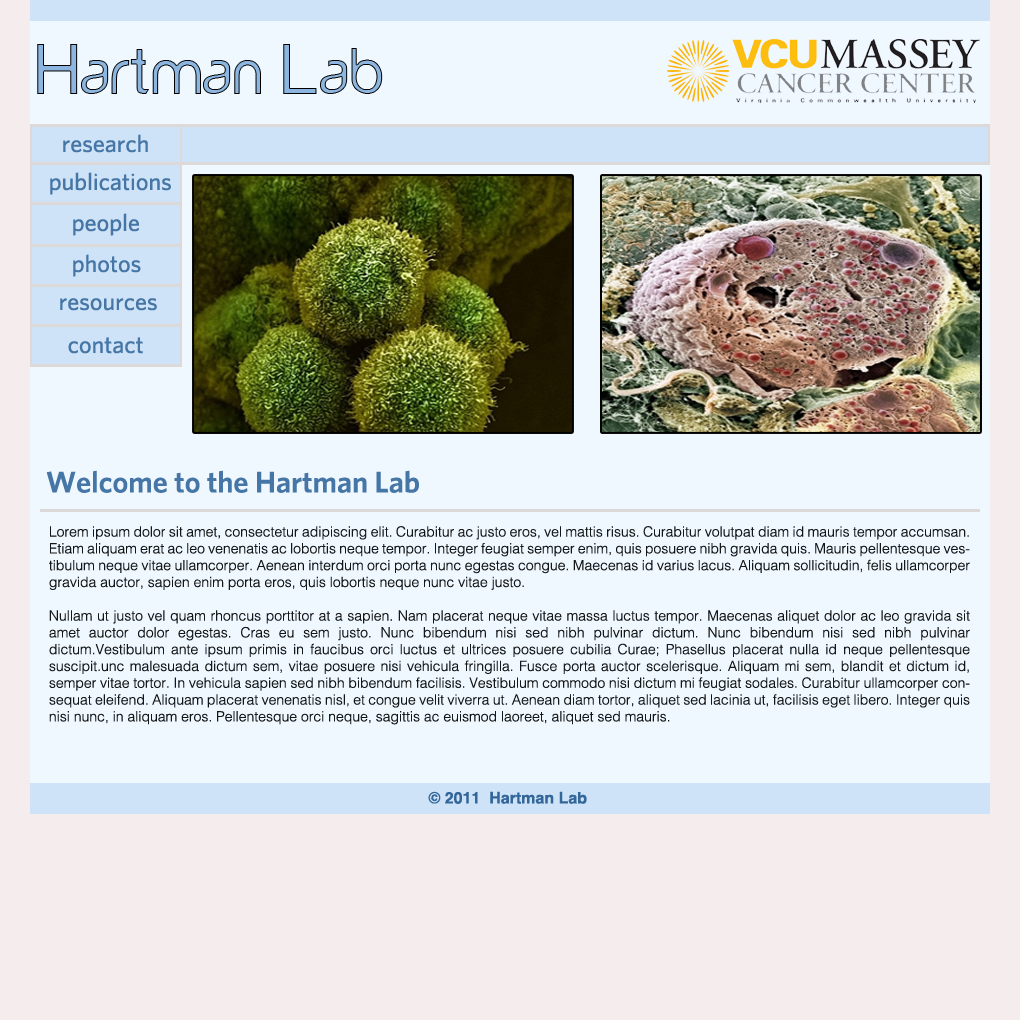
<style>
.page{position:relative;width:1020px;height:1020px;background:#eff7ff}
.page>*{position:absolute;margin:0}
.t1{font:68px "yorkville"}
.t2{font:24px "Whitney-Medium";color:#4675a5}
.t3{font:30px "Whitney-Semibold";color:#4676a5}
.t4{font:14px "Helvetica-Light";color:#141717}
.t5{font:16px "Helvetica-Bold";color:#336699}
</style>
<div class="page">
<p class="t1" style="left:37px;top:44px;width:346px;height:50px">Hartman Lab</p>
<p class="t2" style="left:63px;top:134px;width:85px;height:19px">research</p>
<p class="t2" style="left:50px;top:172px;width:121px;height:23px">publications</p>
<p class="t2" style="left:73px;top:213px;width:66px;height:23px">people</p>
<p class="t2" style="left:73px;top:254px;width:68px;height:23px">photos</p>
<p class="t2" style="left:60px;top:298px;width:97px;height:13px">resources</p>
<p class="t2" style="left:68px;top:337px;width:75px;height:17px">contact</p>
<p class="t3" style="left:46px;top:470px;width:373px;height:23px">Welcome to the Hartman Lab</p>
<p class="t4" style="left:49px;top:526px;width:921px;height:199px;text-align:justify">Lorem ipsum dolor sit amet, consectetur adipiscing elit. Curabitur ac justo eros, vel mattis risus. Curabitur volutpat diam id mauris tempor accumsan. Etiam aliquam erat ac leo venenatis ac lobortis neque tempor. Integer feugiat semper enim, quis posuere nibh gravida quis. Mauris pellentesque vestibulum neque vitae ullamcorper. Aenean interdum orci porta nunc egestas congue. Maecenas id varius lacus. Aliquam sollicitudin, felis ullamcorper gravida auctor, sapien enim porta eros, quis lobortis neque nunc vitae justo.<br><br>Nullam ut justo vel quam rhoncus porttitor at a sapien. Nam placerat neque vitae massa luctus tempor. Maecenas aliquet dolor ac leo gravida sit amet auctor dolor egestas. Cras eu sem justo. Nunc bibendum nisi sed nibh pulvinar dictum. Nunc bibendum nisi sed nibh pulvinar dictum.Vestibulum ante ipsum primis in faucibus orci luctus et ultrices posuere cubilia Curae; Phasellus placerat nulla id neque pellentesque suscipit.unc malesuada dictum sem, vitae posuere nisi vehicula fringilla. Fusce porta auctor scelerisque. Aliquam mi sem, blandit et dictum id, semper vitae tortor. In vehicula sapien sed nibh bibendum facilisis. Vestibulum commodo nisi dictum mi feugiat sodales. Curabitur ullamcorper consequat eleifend. Aliquam placerat venenatis nisl, et congue velit viverra ut. Aenean diam tortor, aliquet sed lacinia ut, facilisis eget libero. Integer quis nisi nunc, in aliquam eros. Pellentesque orci neque, sagittis ac euismod laoreet, aliquet sed mauris.</p>
<p class="t5" style="left:428px;top:791px;width:159px;height:13px">© 2011  Hartman Lab</p>
</div>
